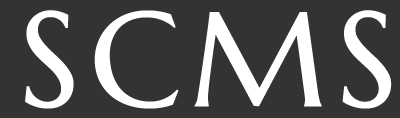
<style>
.page{position:relative;width:400px;height:118px;background:#333333}
.page>*{position:absolute;margin:0}
.t1{font:133.4px "MarcellusSC-Regular";letter-spacing:0.05em;color:#ffffff;font-weight:bold}
</style>
<div class="page">
<p class="t1" style="left:25px;top:10px;width:367px;height:99px">SCMS</p>
</div>
